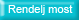
<style>
.page{position:relative;width:79px;height:20px;background:#07c1d2}
.page>*{position:absolute;margin:0}
.t1{font:11px "ArialMT";color:#ffffff}
</style>
<div class="page">
<p class="t1" style="left:8px;top:5px;width:65px;height:10px">Rendelj most</p>
</div>
